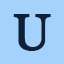
<style>
.page{position:relative;width:64px;height:64px;background:#a4d2fa}
.page>*{position:absolute;margin:0}
.t1{font:50px "Georgia";color:#0f2139;font-weight:bold}
</style>
<div class="page">
<p class="t1" style="left:13px;top:14px;width:38px;height:37px">U</p>
</div>
